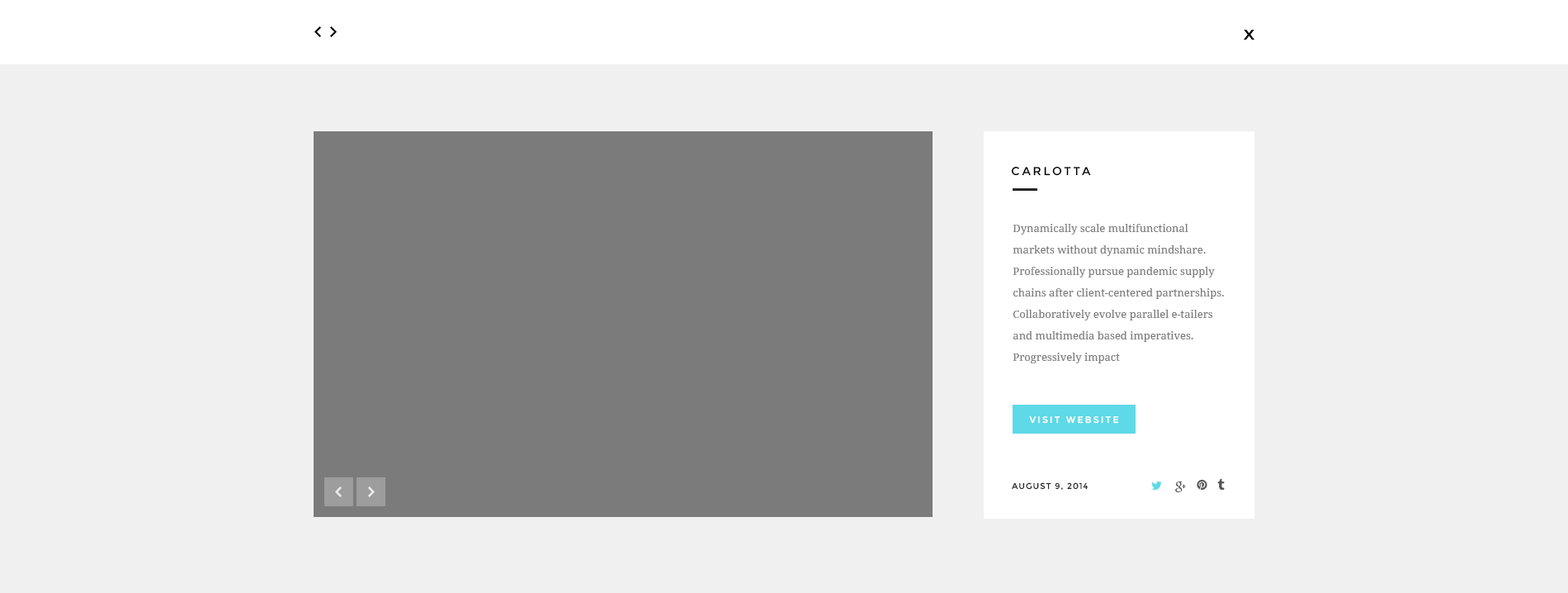
<style>
.page{position:relative;width:1568px;height:593px;background:#f0f0f0}
.page>*{position:absolute;margin:0}
.t1{font:11.6px "Montserrat-Regular";letter-spacing:0.2em;color:#000000;text-transform:uppercase}
.t2{font:10.7px/21.5px "DroidSerif";color:#7e7d7d}
.t3{font:9.1px "Montserrat-Regular";letter-spacing:0.2em;color:#ffffff}
.t4{font:8.3px "Montserrat-Regular";letter-spacing:0.1em;color:#272626;text-transform:uppercase}
</style>
<div class="page">
<p class="t1" style="left:1011px;top:166px;width:80px;height:10px">Carlotta</p>
<p class="t2" style="left:1013px;top:224px;width:211px;height:139px">Dynamically scale multifunctional markets without dynamic mindshare. Professionally pursue pandemic supply chains after client-centered partnerships. Collaboratively evolve parallel e-tailers and multimedia based imperatives. Progressively impact</p>
<p class="t3" style="left:1029px;top:416px;width:90px;height:7px">VISIT WEBSITE</p>
<p class="t4" style="left:1012px;top:482px;width:76px;height:8px">AUGUST 9, 2014</p>
</div>
